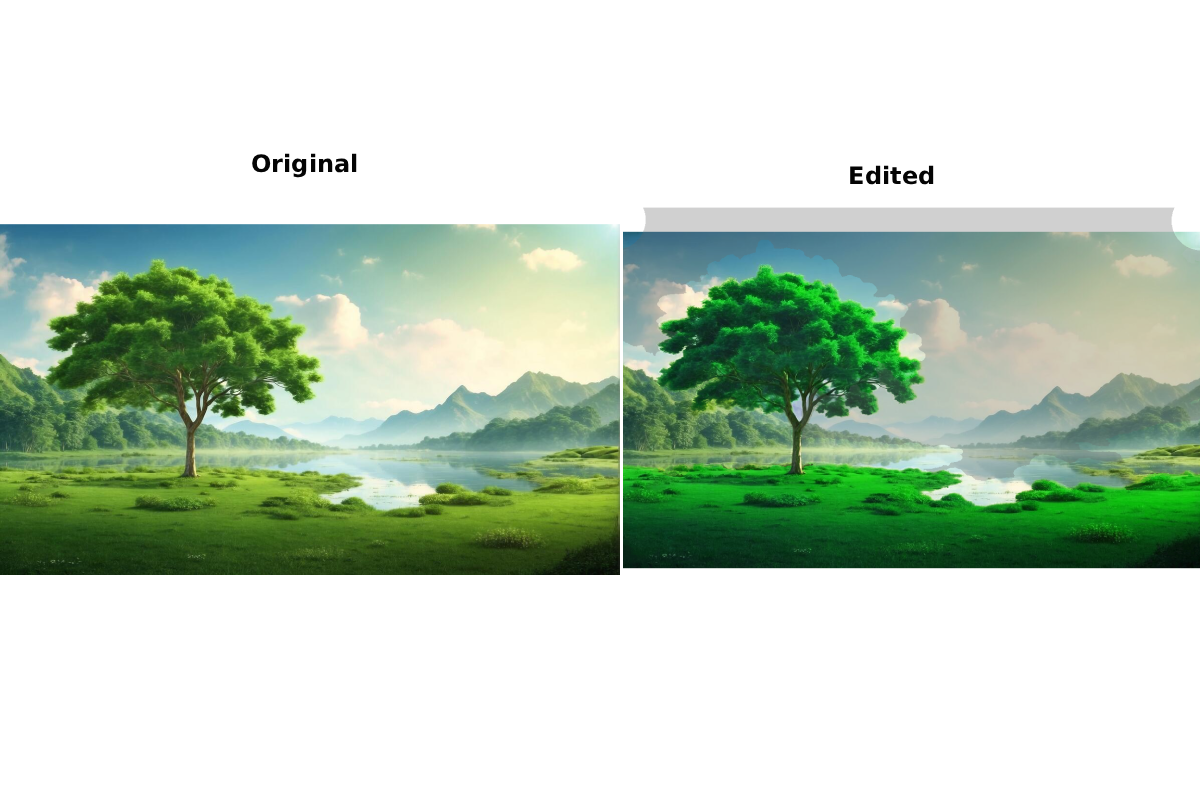
<style>
.page{position:relative;width:1200px;height:800px;background:#ffffff}
.page>*{position:absolute;margin:0}
.t1{font:24px "DynaPuff-SemiBold_619.000wght_100.000wdth";color:#040404}
</style>
<div class="page">
<p class="t1" style="left:252px;top:153px;width:105px;height:25px">Original</p>
<p class="t1" style="left:850px;top:165px;width:84px;height:20px">Edited</p>
</div>
